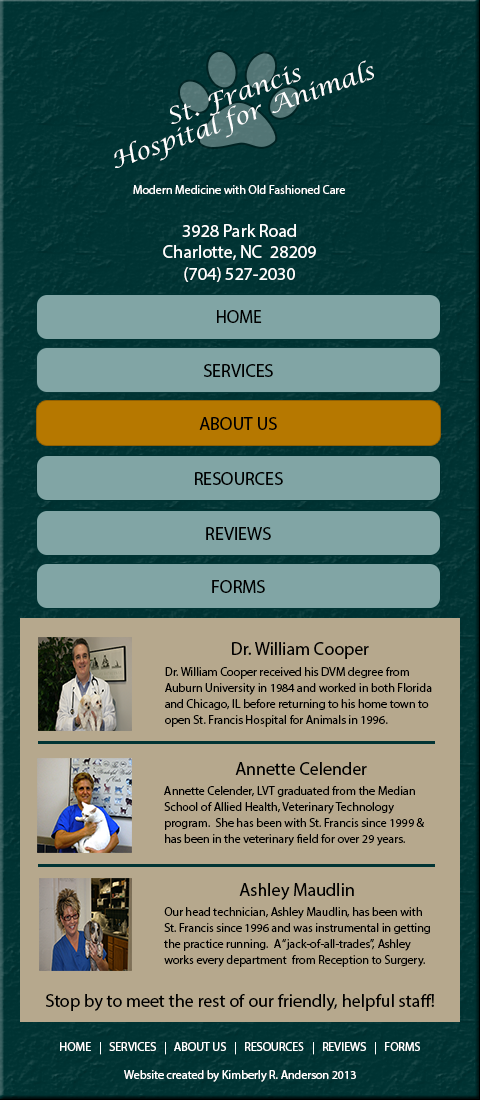
<style>
.page{position:relative;width:480px;height:1100px;background:#b6a88d}
.page>*{position:absolute;margin:0}
.t1{font:22.9px/22.9px "LucidaCalligraphy-Italic";color:#ffffff;scale:1.07 1}
.t2{font:12px "MyriadPro-Regular";color:#ffffff}
.t3{font:18px "MyriadPro-Regular";color:#ffffff}
.t4{font:18px "MyriadPro-Regular";color:#000000}
.t5{font:12px/16px "MyriadPro-Regular";color:#000000}
</style>
<div class="page">
<p class="t1" style="left:114px;top:60px;width:260px;height:108px;text-align:center;rotate:-19deg">St. Francis<br>Hospital for Animals</p>
<p class="t2" style="left:133px;top:185px;width:212px;height:9px">Modern Medicine with Old Fashioned Care</p>
<p class="t3" style="left:163px;top:224px;width:153px;height:58px;text-align:center">3928 Park Road<br>Charlotte, NC  28209<br>(704) 527-2030</p>
<p class="t4" style="left:217px;top:310px;width:45px;height:13px">HOME</p>
<p class="t4" style="left:204px;top:364px;width:69px;height:13px">SERVICES</p>
<p class="t4" style="left:199px;top:417px;width:78px;height:13px">ABOUT US</p>
<p class="t4" style="left:195px;top:472px;width:88px;height:13px">RESOURCES</p>
<p class="t4" style="left:206px;top:527px;width:65px;height:13px">REVIEWS</p>
<p class="t4" style="left:212px;top:580px;width:53px;height:13px">FORMS</p>
<p class="t4" style="left:232px;top:642px;width:137px;height:17px">Dr. William Cooper</p>
<p class="t5" style="left:165px;top:667px;width:267px;height:60px">Dr. William Cooper received his DVM degree from<br>Auburn University in 1984 and worked in both Florida <br>and Chicago, IL before returning to his home town to <br>open St. Francis Hospital for Animals in 1996.</p>
<p class="t4" style="left:235px;top:762px;width:132px;height:13px">Annette Celender</p>
<p class="t5" style="left:164px;top:786px;width:260px;height:60px">Annette Celender, LVT graduated from the Median <br>School of Allied Health, Veterinary Technology<br>program.  She has been with St. Francis since 1999 &amp;<br>has been in the veterinary field for over 29 years.</p>
<p class="t4" style="left:239px;top:883px;width:115px;height:17px">Ashley Maudlin</p>
<p class="t5" style="left:164px;top:907px;width:266px;height:60px">Our head technician, Ashley Maudlin, has been with <br>St. Francis since 1996 and was instrumental in getting<br>the practice running.  A “jack-of-all-trades”, Ashley <br>works every department  from Reception to Surgery.</p>
<p class="t4" style="left:46px;top:994px;width:388px;height:17px">Stop by to meet the rest of our friendly, helpful staff!</p>
<p class="t2" style="left:60px;top:1042px;width:360px;height:13px">HOME   |   SERVICES   |   ABOUT US   |   RESOURCES   |   REVIEWS   |   FORMS</p>
<p class="t2" style="left:124px;top:1070px;width:232px;height:12px">Website created by Kimberly R. Anderson 2013</p>
</div>
